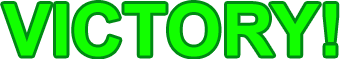
<style>
.page{position:relative;width:340px;height:59px;background:#ffffff}
.page>*{position:absolute;margin:0}
.t1{font:72px "Arial-BoldMT";color:#12ff00}
</style>
<div class="page">
<p class="t1" style="left:3px;top:3px;width:334px;height:54px">VICTORY!</p>
</div>
